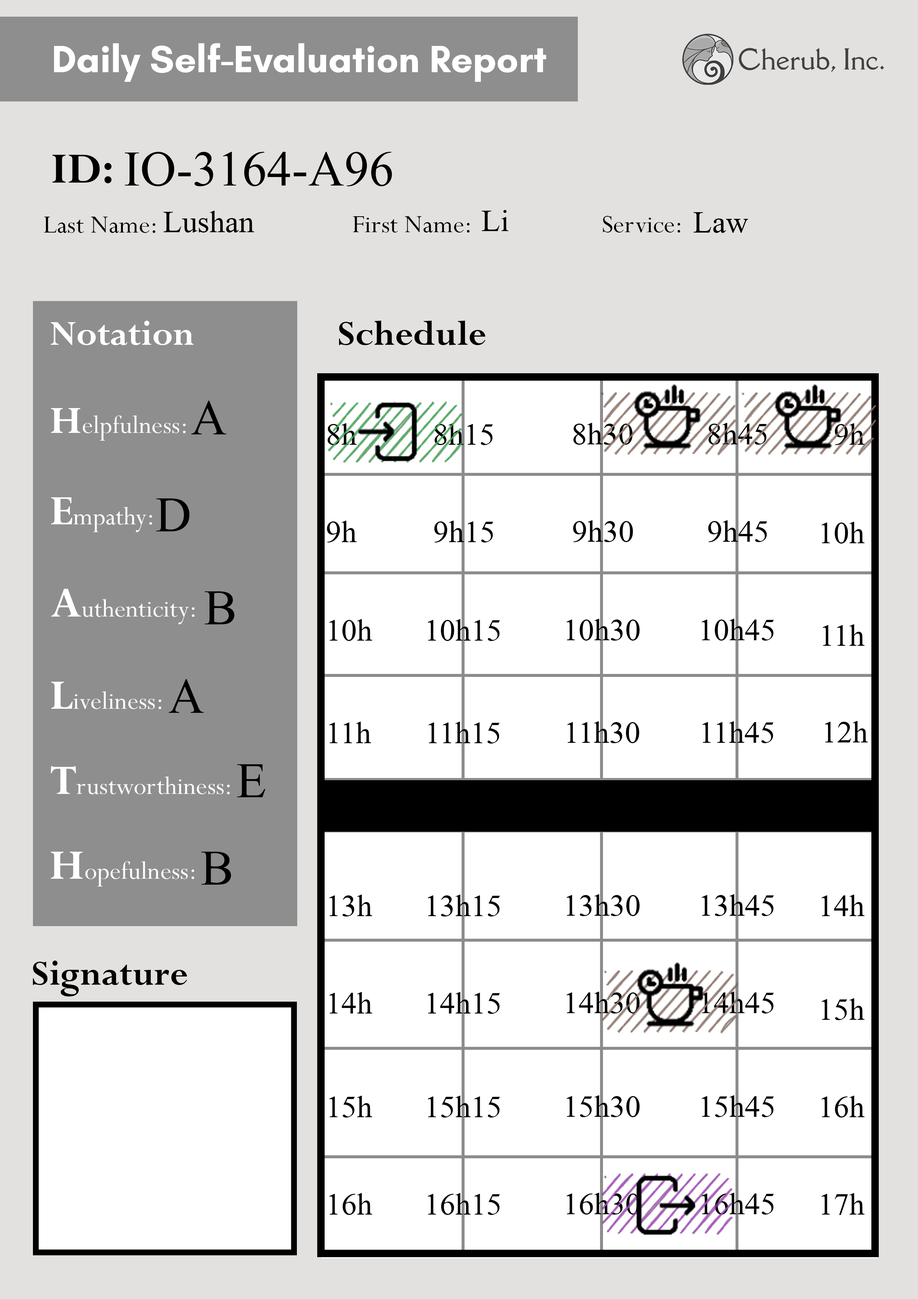
<style>
.page{position:relative;width:918px;height:1299px;background:#ffffff}
.page>*{position:absolute;margin:0}
.t1{font:74px "Microsoft-Himalaya";color:#000000}
.t2{font:46.3px "Microsoft-Himalaya";color:#000000}
</style>
<div class="page">
<p class="t1" style="left:125px;top:152px;width:267px;height:34px">IO-3164-A96</p>
<p class="t2" style="left:482px;top:210px;width:27px;height:21px">Li</p>
<p class="t2" style="left:163px;top:211px;width:91px;height:21px">Lushan</p>
<p class="t2" style="left:693px;top:212px;width:55px;height:21px">Law</p>
<p class="t1" style="left:191px;top:401px;width:36px;height:33px">A</p>
<p class="t2" style="left:328px;top:423px;width:29px;height:22px">8h</p>
<p class="t2" style="left:435px;top:423px;width:58px;height:22px">8h15</p>
<p class="t2" style="left:573px;top:423px;width:60px;height:22px">8h30</p>
<p class="t2" style="left:709px;top:423px;width:58px;height:22px">8h45</p>
<p class="t2" style="left:835px;top:423px;width:30px;height:22px">9h</p>
<p class="t1" style="left:156px;top:498px;width:34px;height:33px">D</p>
<p class="t2" style="left:327px;top:521px;width:30px;height:21px">9h</p>
<p class="t2" style="left:434px;top:521px;width:60px;height:21px">9h15</p>
<p class="t2" style="left:573px;top:520px;width:60px;height:22px">9h30</p>
<p class="t2" style="left:708px;top:520px;width:59px;height:22px">9h45</p>
<p class="t2" style="left:822px;top:522px;width:43px;height:21px">10h</p>
<p class="t1" style="left:205px;top:591px;width:30px;height:33px">B</p>
<p class="t2" style="left:329px;top:619px;width:43px;height:22px">10h</p>
<p class="t2" style="left:428px;top:619px;width:72px;height:22px">10h15</p>
<p class="t2" style="left:566px;top:619px;width:74px;height:21px">10h30</p>
<p class="t2" style="left:702px;top:619px;width:72px;height:21px">10h45</p>
<p class="t2" style="left:823px;top:624px;width:42px;height:22px">11h</p>
<p class="t1" style="left:169px;top:679px;width:35px;height:34px">A</p>
<p class="t2" style="left:329px;top:722px;width:42px;height:21px">11h</p>
<p class="t2" style="left:428px;top:722px;width:72px;height:21px">11h15</p>
<p class="t2" style="left:567px;top:721px;width:72px;height:22px">11h30</p>
<p class="t2" style="left:702px;top:721px;width:72px;height:22px">11h45</p>
<p class="t2" style="left:825px;top:721px;width:43px;height:21px">12h</p>
<p class="t1" style="left:237px;top:764px;width:28px;height:33px">E</p>
<p class="t1" style="left:201px;top:852px;width:30px;height:32px">B</p>
<p class="t2" style="left:329px;top:894px;width:43px;height:22px">13h</p>
<p class="t2" style="left:428px;top:894px;width:72px;height:22px">13h15</p>
<p class="t2" style="left:566px;top:894px;width:74px;height:22px">13h30</p>
<p class="t2" style="left:702px;top:894px;width:72px;height:22px">13h45</p>
<p class="t2" style="left:822px;top:894px;width:43px;height:22px">14h</p>
<p class="t2" style="left:329px;top:992px;width:43px;height:21px">14h</p>
<p class="t2" style="left:428px;top:992px;width:72px;height:22px">14h15</p>
<p class="t2" style="left:566px;top:991px;width:74px;height:22px">14h30</p>
<p class="t2" style="left:702px;top:991px;width:72px;height:22px">14h45</p>
<p class="t2" style="left:822px;top:998px;width:43px;height:22px">15h</p>
<p class="t2" style="left:329px;top:1095px;width:43px;height:22px">15h</p>
<p class="t2" style="left:428px;top:1095px;width:72px;height:22px">15h15</p>
<p class="t2" style="left:566px;top:1095px;width:74px;height:22px">15h30</p>
<p class="t2" style="left:702px;top:1095px;width:72px;height:22px">15h45</p>
<p class="t2" style="left:822px;top:1095px;width:43px;height:22px">16h</p>
<p class="t2" style="left:329px;top:1193px;width:43px;height:22px">16h</p>
<p class="t2" style="left:428px;top:1193px;width:72px;height:22px">16h15</p>
<p class="t2" style="left:566px;top:1192px;width:74px;height:22px">16h30</p>
<p class="t2" style="left:702px;top:1192px;width:72px;height:22px">16h45</p>
<p class="t2" style="left:822px;top:1193px;width:43px;height:22px">17h</p>
</div>
